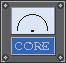
<style>
.page{position:relative;width:66px;height:63px;background:#5d5e5f}
.page>*{position:absolute;margin:0}
.t1{font:11.1px "Immortal";color:#acb7c9}
</style>
<div class="page">
<p class="t1" style="left:15px;top:42px;width:34px;height:8px">CORE</p>
</div>
